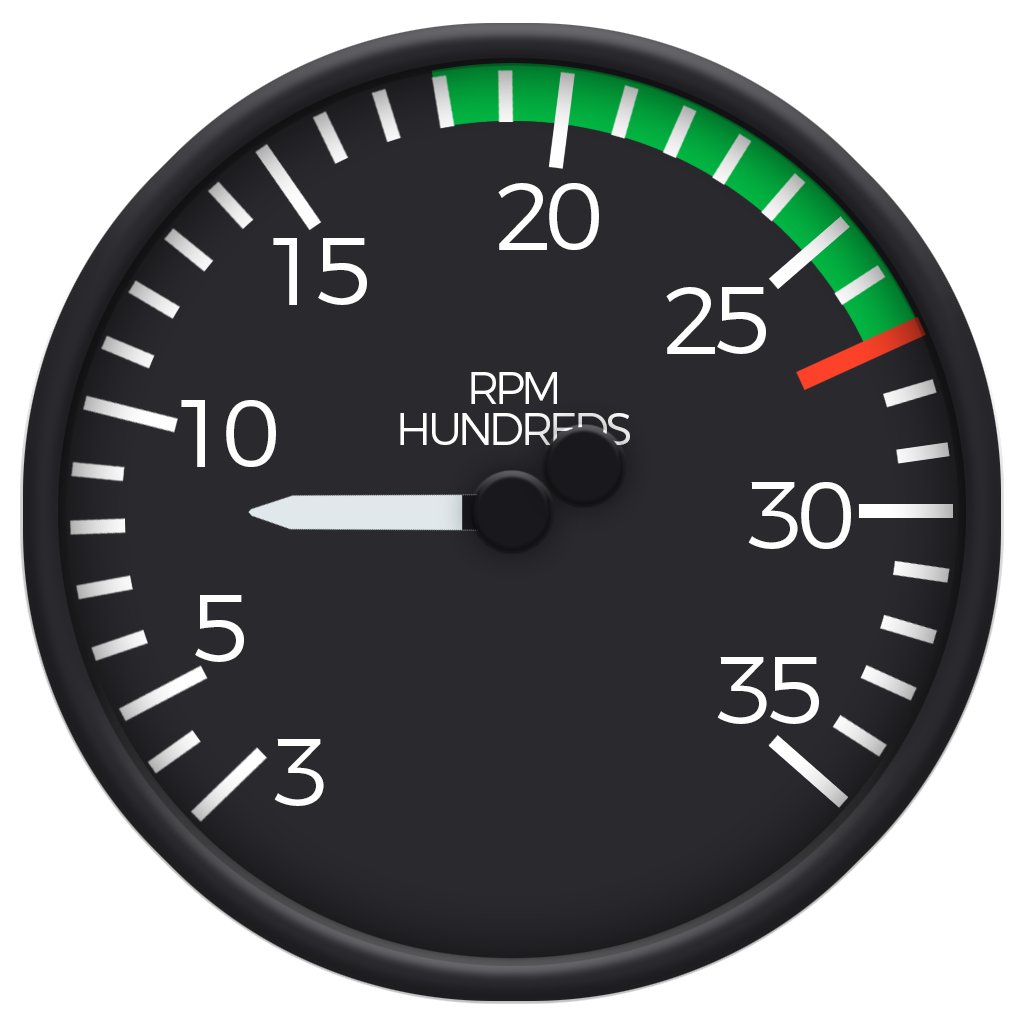
<style>
.page{position:relative;width:1024px;height:1024px;background:#2a292e}
.page>*{position:absolute;margin:0}
.t1{font:95.4px "Montserrat-Light";letter-spacing:-0.085em;color:#fefefe}
.t2{font:44.4px/41.6px "Montserrat-Light";letter-spacing:-0.085em;color:#fefefe}
</style>
<div class="page">
<p class="t1" style="left:498px;top:183px;width:101px;height:67px">20</p>
<p class="t1" style="left:273px;top:238px;width:94px;height:67px">15</p>
<p class="t1" style="left:666px;top:287px;width:100px;height:67px">25</p>
<p class="t2" style="left:400px;top:372px;width:230px;height:73px;text-align:center">RPM<br>HUNDREDS</p>
<p class="t1" style="left:181px;top:400px;width:95px;height:67px">10</p>
<p class="t1" style="left:748px;top:482px;width:103px;height:67px">30</p>
<p class="t1" style="left:195px;top:595px;width:49px;height:67px">5</p>
<p class="t1" style="left:717px;top:657px;width:102px;height:67px">35</p>
<p class="t1" style="left:274px;top:739px;width:50px;height:67px">3</p>
</div>
